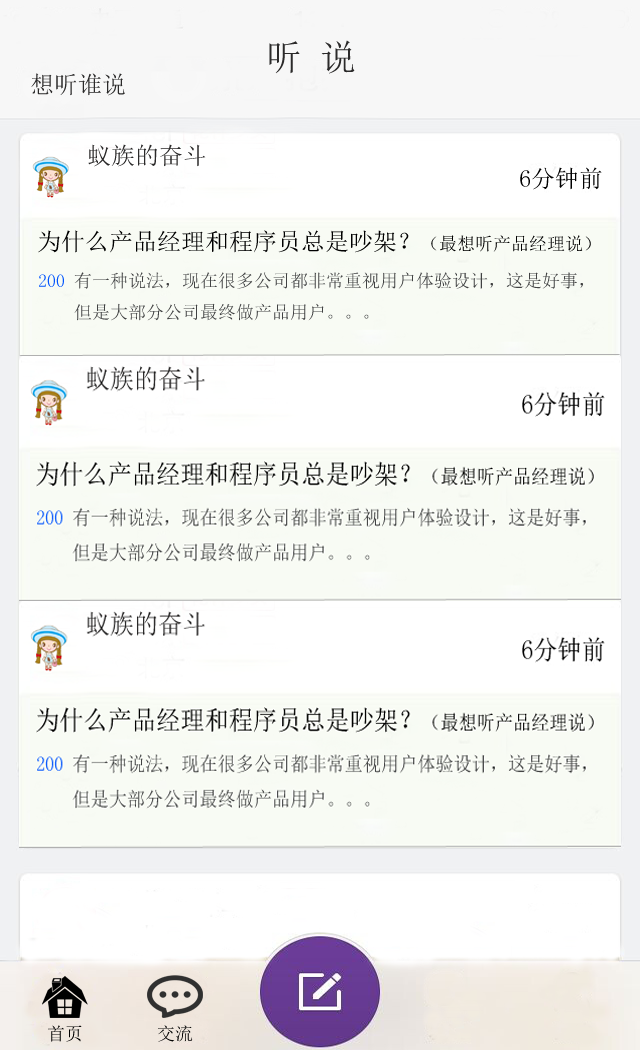
<style>
.page{position:relative;width:640px;height:1050px;background:#ffffff}
.page>*{position:absolute;margin:0}
.t1{font:24px "SimSun";color:#2b2a2a}
.t2{font:24px "SimSun";color:#000000}
.t3{font:18px "SimSun";color:#000000}
.t4{font:18px "SimSun";color:#0053fd}
.t5{font:18px "SimSun";color:#414243}
.t6{font:18px "SimSun";color:#050505}
</style>
<div class="page">
<p class="t1" style="left:31px;top:73px;width:94px;height:23px">想听谁说</p>
<p class="t1" style="left:88px;top:144px;width:118px;height:23px">蚁族的奋斗</p>
<p class="t2" style="left:520px;top:167px;width:82px;height:23px">6分钟前</p>
<p class="t2" style="left:38px;top:230px;width:553px;height:23px">为什么产品经理和程序员总是吵架？<span class="t3">（最想听产品经理说）</span></p>
<p class="t4" style="left:39px;top:274px;width:25px;height:13px">200</p>
<p class="t5" style="left:74px;top:272px;width:509px;height:49px">有一种说法，现在很多公司都非常重视用户体验设计，这是好事，<br>但是大部分公司最终做产品用户。。。</p>
<p class="t3" style="left:48px;top:1025px;width:34px;height:17px">首页</p>
<p class="t6" style="left:158px;top:1025px;width:35px;height:17px">交流</p>
</div>
